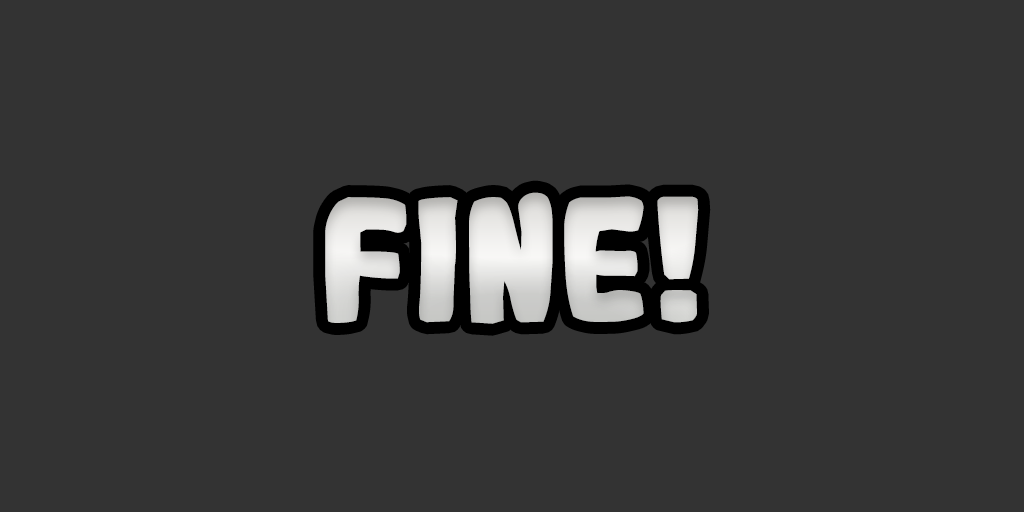
<style>
.page{position:relative;width:1024px;height:512px;background:#333333}
.page>*{position:absolute;margin:0}
.t1{font:166.7px "Gogono-Cocoa-Mochi"}
</style>
<div class="page">
<p class="t1" style="left:325px;top:192px;width:374px;height:132px">FINE!</p>
</div>
